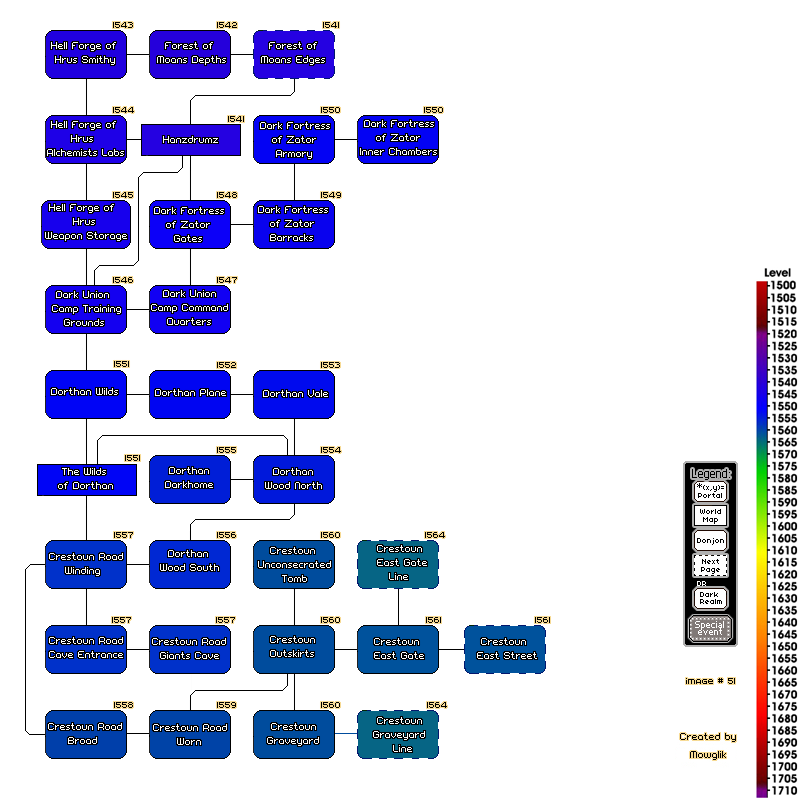
<style>
.page{position:relative;width:800px;height:800px;background:#ffffff}
.page>*{position:absolute;margin:0}
.t1{font:8px "00Erratix";color:#000000}
.t2{font:8px/7px "00Acrobatix";color:#ffffff}
.t3{font:8px "00Acrobatix";color:#ffffff}
</style>
<div class="page">
<p class="t1" style="left:113px;top:22px;width:20px;height:6px">1543</p>
<p class="t1" style="left:217px;top:22px;width:20px;height:6px">1542</p>
<p class="t1" style="left:323px;top:22px;width:16px;height:6px">1541</p>
<p class="t2" style="left:51px;top:42px;width:65px;height:23px">Hell Forge of<br><br> Hrus Smithy</p>
<p class="t2" style="left:157px;top:42px;width:69px;height:23px">Forest of<br><br>Moans Depths</p>
<p class="t2" style="left:261px;top:42px;width:64px;height:23px">Forest of<br><br>Moans Edges</p>
<p class="t1" style="left:113px;top:107px;width:21px;height:6px">1544</p>
<p class="t1" style="left:321px;top:107px;width:19px;height:6px">1550</p>
<p class="t1" style="left:424px;top:107px;width:19px;height:6px">1550</p>
<p class="t2" style="left:47px;top:121px;width:77px;height:35px">Hell Forge of<br><br>      Hrus<br><br>Alchemists Labs</p>
<p class="t1" style="left:228px;top:116px;width:16px;height:6px">1541</p>
<p class="t2" style="left:260px;top:122px;width:70px;height:37px">Dark Fortress<br><br>   of Zator<br><br>    Armory</p>
<p class="t2" style="left:360px;top:120px;width:77px;height:35px">Dark Fortress<br><br>    of Zator<br><br>Inner Chambers</p>
<p class="t3" style="left:163px;top:136px;width:55px;height:7px">Hanzdrumz</p>
<p class="t1" style="left:113px;top:192px;width:20px;height:6px">1545</p>
<p class="t1" style="left:217px;top:192px;width:20px;height:6px">1548</p>
<p class="t1" style="left:321px;top:192px;width:20px;height:6px">1549</p>
<p class="t2" style="left:45px;top:204px;width:82px;height:37px">Hell Forge of<br><br>       Hrus<br><br>Weapon Storage</p>
<p class="t2" style="left:154px;top:207px;width:70px;height:35px">Dark Fortress<br><br>   of Zator<br><br>     Gates</p>
<p class="t2" style="left:258px;top:206px;width:70px;height:35px">Dark Fortress<br><br>   of Zator<br><br>   Barracks</p>
<p class="t1" style="left:113px;top:277px;width:20px;height:6px">1546</p>
<p class="t1" style="left:217px;top:277px;width:20px;height:6px">1547</p>
<p class="t2" style="left:52px;top:291px;width:69px;height:35px">Dark Union<br><br>Camp Training<br><br>   Grounds</p>
<p class="t2" style="left:151px;top:290px;width:77px;height:35px">Dark Union<br><br>Camp Command<br><br>    Quarters</p>
<p class="t1" style="left:114px;top:361px;width:15px;height:6px">1551</p>
<p class="t1" style="left:217px;top:362px;width:19px;height:6px">1552</p>
<p class="t1" style="left:321px;top:362px;width:19px;height:6px">1553</p>
<p class="t3" style="left:51px;top:388px;width:67px;height:7px">Dorthan Wilds</p>
<p class="t3" style="left:155px;top:389px;width:71px;height:7px">Dorthan Plane</p>
<p class="t3" style="left:263px;top:390px;width:65px;height:7px">Dorthan Vale</p>
<p class="t1" style="left:217px;top:447px;width:19px;height:6px">1555</p>
<p class="t1" style="left:321px;top:447px;width:20px;height:6px">1554</p>
<p class="t1" style="left:125px;top:455px;width:15px;height:6px">1551</p>
<p class="t2" style="left:58px;top:468px;width:55px;height:21px">The Wilds<br><br>of Dorthan</p>
<p class="t2" style="left:165px;top:467px;width:48px;height:21px">Dorthan<br><br>Darkhome</p>
<p class="t2" style="left:265px;top:468px;width:57px;height:21px">Dorthan<br><br>Wood North</p>
<p class="t1" style="left:114px;top:532px;width:19px;height:6px">1557</p>
<p class="t1" style="left:217px;top:532px;width:19px;height:6px">1556</p>
<p class="t1" style="left:321px;top:532px;width:19px;height:6px">1560</p>
<p class="t1" style="left:425px;top:532px;width:20px;height:6px">1564</p>
<p class="t2" style="left:377px;top:545px;width:50px;height:35px">Crestoun<br><br>East Gate<br><br>   Line</p>
<p class="t2" style="left:49px;top:553px;width:74px;height:23px">Crestoun Road<br><br>    Winding</p>
<p class="t2" style="left:160px;top:550px;width:59px;height:21px">Dorthan<br><br>Wood South</p>
<p class="t2" style="left:258px;top:547px;width:73px;height:35px">Crestoun<br><br>Unconsecrated<br><br>      Tomb</p>
<p class="t1" style="left:112px;top:617px;width:19px;height:6px">1557</p>
<p class="t1" style="left:216px;top:617px;width:19px;height:6px">1557</p>
<p class="t1" style="left:321px;top:617px;width:19px;height:6px">1560</p>
<p class="t1" style="left:426px;top:617px;width:15px;height:6px">1561</p>
<p class="t1" style="left:535px;top:617px;width:15px;height:6px">1561</p>
<p class="t2" style="left:49px;top:637px;width:74px;height:21px">Crestoun Road<br><br>Cave Entrance</p>
<p class="t2" style="left:152px;top:638px;width:74px;height:21px">Crestoun Road<br><br>  Giants Cave</p>
<p class="t2" style="left:270px;top:636px;width:45px;height:21px">Crestoun<br><br>Outskirts</p>
<p class="t2" style="left:374px;top:638px;width:50px;height:21px">Crestoun<br><br>East Gate</p>
<p class="t2" style="left:477px;top:638px;width:60px;height:21px">Crestoun<br><br>East Street</p>
<p class="t1" style="left:686px;top:678px;width:49px;height:6px">Image # 51</p>
<p class="t1" style="left:114px;top:702px;width:19px;height:6px">1558</p>
<p class="t1" style="left:217px;top:702px;width:19px;height:6px">1559</p>
<p class="t1" style="left:321px;top:702px;width:19px;height:6px">1560</p>
<p class="t1" style="left:427px;top:702px;width:20px;height:6px">1564</p>
<p class="t2" style="left:48px;top:723px;width:74px;height:21px">Crestoun Road<br><br>     Broad</p>
<p class="t2" style="left:153px;top:724px;width:74px;height:21px">Crestoun Road<br><br>      Worn</p>
<p class="t2" style="left:267px;top:723px;width:52px;height:23px">Crestoun<br><br>Graveyard</p>
<p class="t2" style="left:373px;top:717px;width:52px;height:35px">Crestoun<br><br>Graveyard<br><br>     Line</p>
</div>
